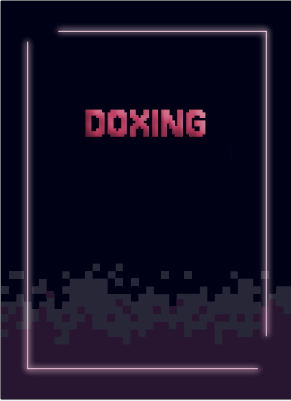
<style>
.page{position:relative;width:291px;height:401px;background:#000115}
.page>*{position:absolute;margin:0}
.t1{font:50px "Jersey10-Regular";letter-spacing:0.025em}
</style>
<div class="page">
<p class="t1" style="left:85px;top:109px;width:121px;height:28px">DOXING</p>
</div>
